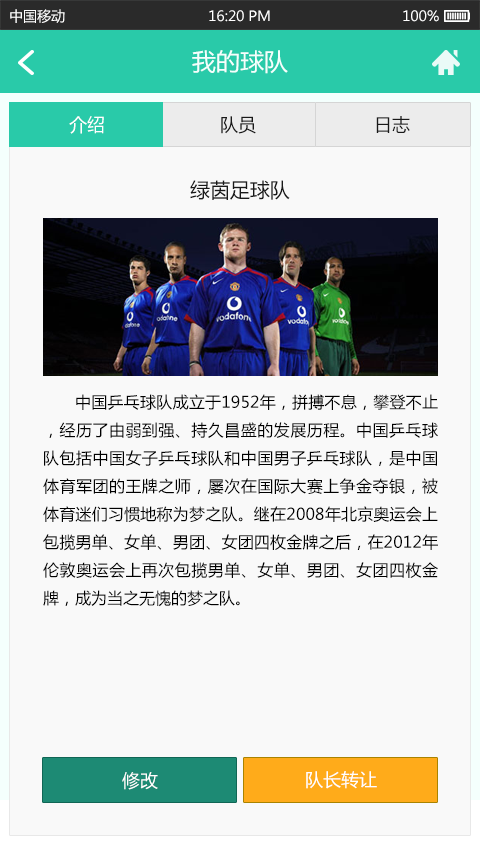
<style>
.page{position:relative;width:480px;height:845px;background:#f9f9f9}
.page>*{position:absolute;margin:0}
.t1{font:14px "MicrosoftYaHei";color:#ffffff}
.t2{font:24px "MicrosoftYaHei";color:#f4fffd}
.t3{font:18px "MicrosoftYaHei";color:#ffffff}
.t4{font:18px "MicrosoftYaHei";color:#191919}
.t5{font:20px "MicrosoftYaHei";color:#191919}
.t6{font:16px "MicrosoftYaHei";color:#000000}
</style>
<div class="page">
<p class="t1" style="left:10px;top:9px;width:55px;height:14px">中国移动</p>
<p class="t1" style="left:209px;top:10px;width:61px;height:12px">16:20 PM</p>
<p class="t1" style="left:403px;top:10px;width:36px;height:12px">100%</p>
<p class="t2" style="left:192px;top:50px;width:96px;height:24px">我的球队</p>
<p class="t3" style="left:69px;top:116px;width:35px;height:18px">介绍</p>
<p class="t4" style="left:221px;top:116px;width:35px;height:18px">队员</p>
<p class="t4" style="left:376px;top:116px;width:34px;height:17px">日志</p>
<p class="t5" style="left:190px;top:180px;width:100px;height:20px">绿茵足球队</p>
<p class="t6" style="left:43px;top:394px;width:395px;height:213px;text-align:justify">中国乒乓球队成立于1952年，拼搏不息，攀登不止，经历了由弱到强、持久昌盛的发展历程。中国乒乓球队包括中国女子乒乓球队和中国男子乒乓球队，是中国体育军团的王牌之师，屡次在国际大赛上争金夺银，被体育迷们习惯地称为梦之队。继在2008年北京奥运会上包揽男单、女单、男团、女团四枚金牌之后，在2012年伦敦奥运会上再次包揽男单、女单、男团、女团四枚金牌，成为当之无愧的梦之队。</p>
<p class="t3" style="left:122px;top:772px;width:36px;height:18px">修改</p>
<p class="t3" style="left:306px;top:771px;width:71px;height:18px">队长转让</p>
</div>
